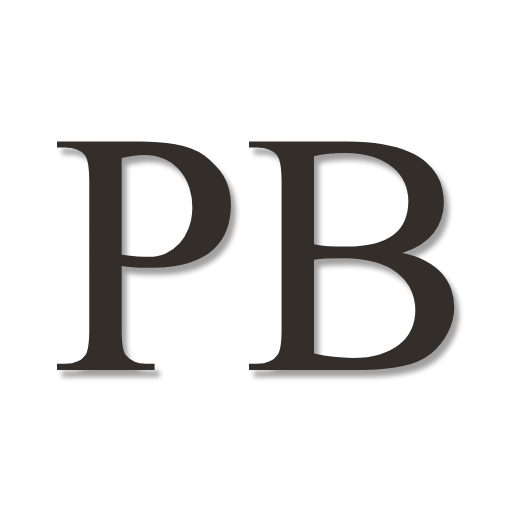
<style>
.page{position:relative;width:512px;height:512px;background:#ffffff}
.page>*{position:absolute;margin:0}
.t1{font:332px "GalatiaSIL";color:#282523}
</style>
<div class="page">
<p class="t1" style="left:56px;top:141px;width:399px;height:229px">PB</p>
</div>
